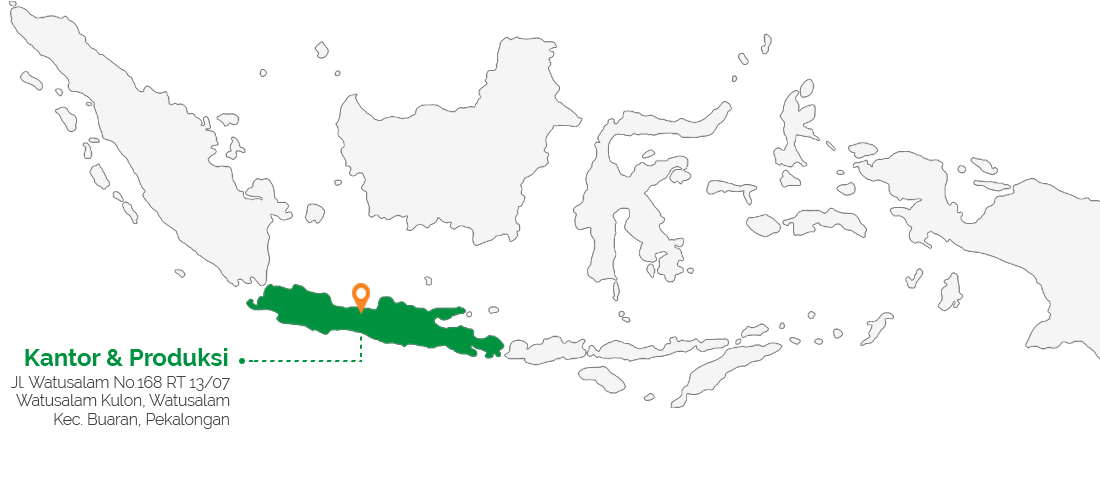
<style>
.page{position:relative;width:1100px;height:481px;background:#ffffff}
.page>*{position:absolute;margin:0}
.t1{font:24px "Raleway-Bold";color:#00923f}
.t2{font:15.6px "Raleway-Light";color:#444444}
</style>
<div class="page">
<p class="t1" style="left:25px;top:348px;width:203px;height:18px">Kantor &amp; Produksi</p>
<p class="t2" style="left:10px;top:376px;width:220px;height:53px;text-align:right">Jl. Watusalam No.168 RT 13/07<br>Watusalam Kulon, Watusalam<br>Kec. Buaran, Pekalongan</p>
</div>
